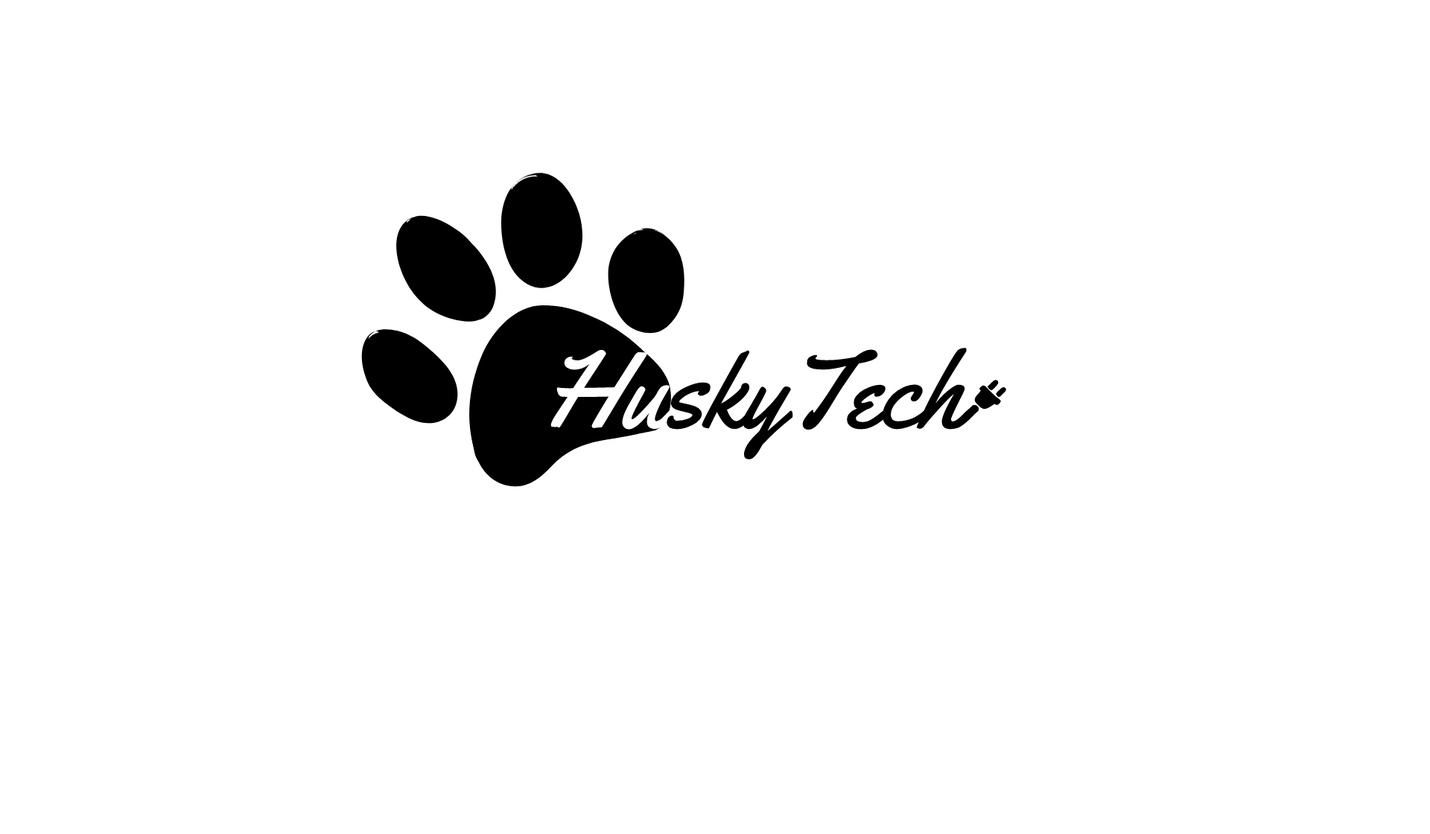
<style>
.page{position:relative;width:1430px;height:834px;background:#ffffff}
.page>*{position:absolute;margin:0}
.t1{font:107.2px "Yellowtail-Regular";color:#000000}
.t2{font:107.2px "Yellowtail-Regular";color:#ffffff}
</style>
<div class="page">
<p class="t1" style="left:550px;top:348px;width:420px;height:111px"><span class="t2">Hu</span>skyTech</p>
</div>
